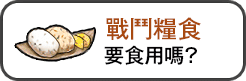
<style>
.page{position:relative;width:246px;height:81px;background:#ffffff}
.page>*{position:absolute;margin:0}
.t1{font:24px "GothicMB101Pr6N-Medium";color:#a84910}
.t2{font:20px "GothicMB101Pr6N-Medium";color:#020103}
</style>
<div class="page">
<p class="t1" style="left:106px;top:17px;width:95px;height:24px">戰鬥糧食</p>
<p class="t2" style="left:104px;top:45px;width:93px;height:21px">要食用嗎?</p>
</div>
